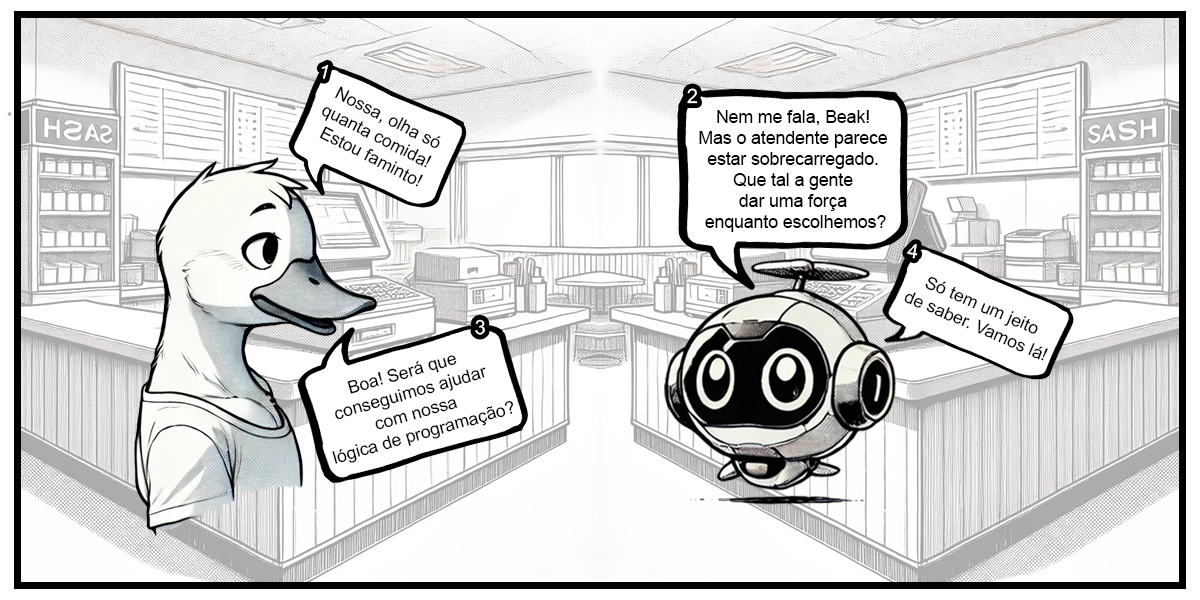
<style>
.page{position:relative;width:1200px;height:600px;background:#ffffff}
.page>*{position:absolute;margin:0}
.t1{font:19.7px "ArialMT";color:#ffffff}
.t2{font:17.5px "ArialMT";color:#000000}
</style>
<div class="page">
<p class="t1" style="left:321px;top:64px;width:8px;height:15px;rotate:14deg">1</p>
<p class="t2" style="left:319px;top:86px;width:122px;height:101px;text-align:center;rotate:27deg">Nossa, olha só <br>quanta comida!  <br>Estou faminto!</p>
<p class="t1" style="left:687px;top:88px;width:11px;height:16px;rotate:-1deg">2</p>
<p class="t2" style="left:699px;top:110px;width:189px;height:122px;text-align:center">Nem me fala, Beak! <br>Mas o atendente parece <br>estar sobrecarregado. <br>Que tal a gente <br>dar uma força <br>enquanto escolhemos?</p>
<p class="t1" style="left:907px;top:244px;width:11px;height:15px;rotate:9deg">4</p>
<p class="t2" style="left:904px;top:276px;width:144px;height:85px;text-align:center;rotate:23deg">Só tem um jeito <br>de saber. Vamos lá!</p>
<p class="t1" style="left:475px;top:319px;width:10px;height:16px;rotate:1deg">3</p>
<p class="t2" style="left:332px;top:355px;width:182px;height:109px;text-align:center;rotate:-16deg">Boa! Será que <br>conseguimos ajudar<br>com nossa<br> lógica de programação?</p>
</div>
